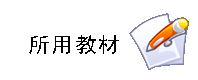
<style>
.page{position:relative;width:198px;height:80px;background:#ffffff}
.page>*{position:absolute;margin:0}
.t1{font:20.9px "SimHei";letter-spacing:0.05em;color:#050505;scale:1.03 1}
</style>
<div class="page">
<p class="t1" style="left:29px;top:35px;width:90px;height:19px">所用教材</p>
</div>
